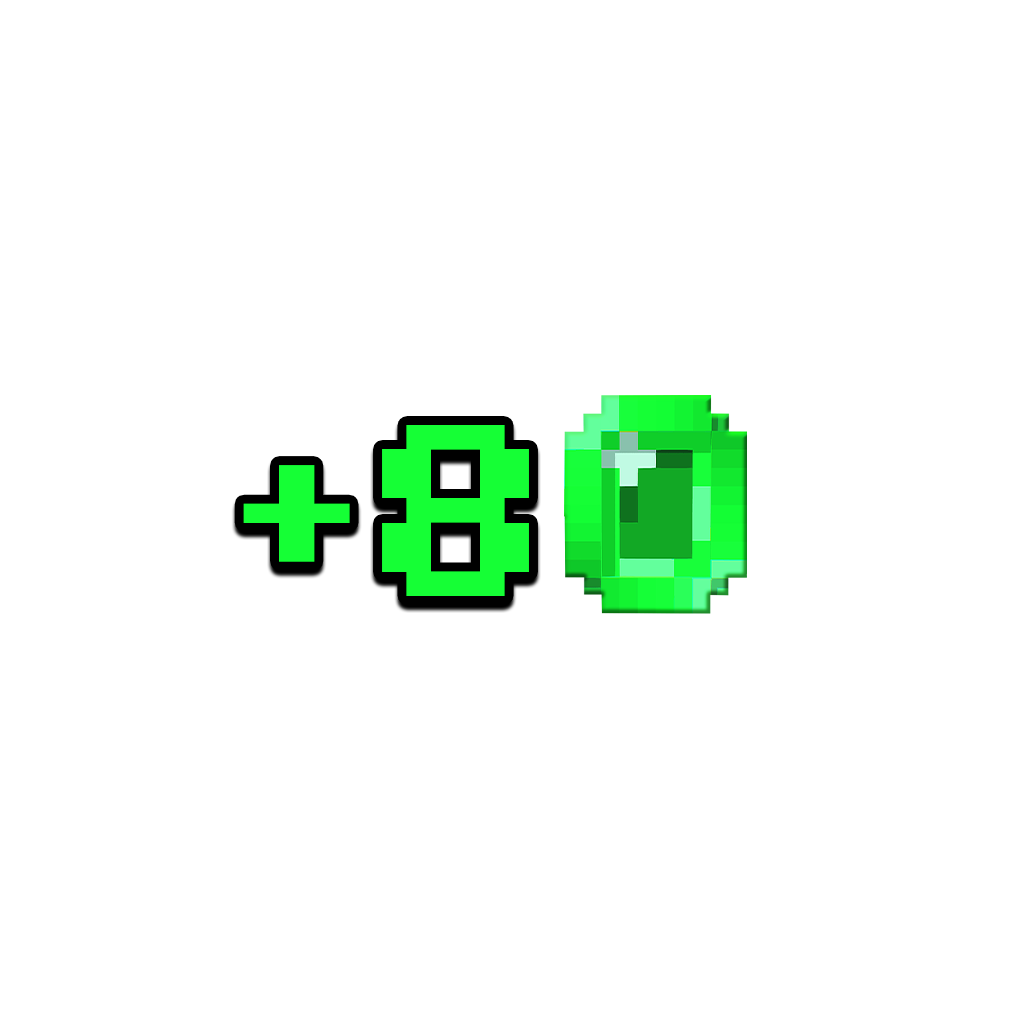
<style>
.page{position:relative;width:1024px;height:1024px;background:#ffffff}
.page>*{position:absolute;margin:0}
.t1{font:244.5px "Minecraft-Bold";color:#15ff35}
.t2{font:193px "Minecraft-Bold";color:#15ff35;scale:0.91 1}
</style>
<div class="page">
<p class="t1" style="left:382px;top:425px;width:147px;height:171px">8</p>
<p class="t2" style="left:243px;top:465px;width:107px;height:97px">+</p>
</div>
